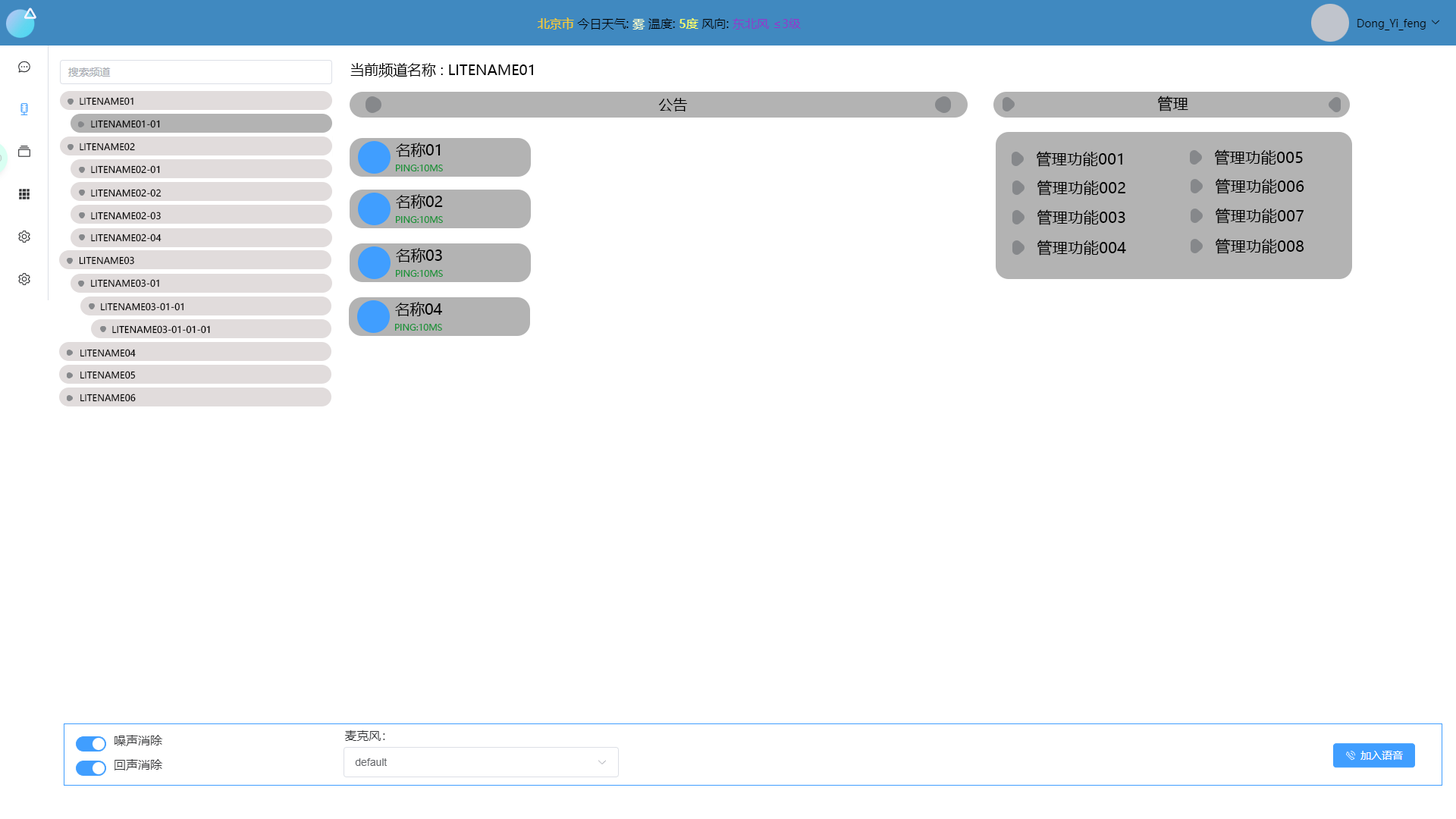
<style>
.page{position:relative;width:1456px;height:819px;background:#ffffff}
.page>*{position:absolute;margin:0}
.t1{font:14.3px "MicrosoftYaHeiUI";color:#000000;text-transform:uppercase}
.t2{font:9.1px "MicrosoftYaHeiUI";color:#000000;text-transform:uppercase}
.t3{font:15.5px "MicrosoftYaHeiUI";color:#000000;text-transform:uppercase}
.t4{font:14.8px "MicrosoftYaHeiUI";color:#000000;text-transform:uppercase}
.t5{font:8.9px "MicrosoftYaHeiUI";color:#199238;text-transform:uppercase}
</style>
<div class="page">
<p class="t1" style="left:350px;top:63px;width:183px;height:14px">当前频道名称 : LITENAME01</p>
<p class="t2" style="left:80px;top:97px;width:53px;height:8px">LiteName01</p>
<p class="t1" style="left:658px;top:98px;width:29px;height:13px">公告</p>
<p class="t3" style="left:1157px;top:96px;width:31px;height:15px">管理</p>
<p class="t2" style="left:91px;top:120px;width:69px;height:8px">LiteName01-01</p>
<p class="t2" style="left:80px;top:143px;width:55px;height:8px">LiteName02</p>
<p class="t4" style="left:396px;top:143px;width:45px;height:14px">名称01</p>
<p class="t3" style="left:1214px;top:149px;width:89px;height:16px">管理功能005</p>
<p class="t3" style="left:1036px;top:151px;width:86px;height:16px">管理功能001</p>
<p class="t2" style="left:91px;top:165px;width:69px;height:9px">LiteName02-01</p>
<p class="t5" style="left:396px;top:165px;width:47px;height:6px">ping:10ms</p>
<p class="t3" style="left:1037px;top:180px;width:88px;height:16px">管理功能002</p>
<p class="t3" style="left:1215px;top:178px;width:89px;height:16px">管理功能006</p>
<p class="t2" style="left:91px;top:189px;width:71px;height:8px">LiteName02-02</p>
<p class="t4" style="left:396px;top:194px;width:47px;height:15px">名称02</p>
<p class="t3" style="left:1037px;top:209px;width:88px;height:16px">管理功能003</p>
<p class="t3" style="left:1215px;top:208px;width:89px;height:16px">管理功能007</p>
<p class="t2" style="left:91px;top:212px;width:70px;height:8px">LiteName02-03</p>
<p class="t5" style="left:396px;top:216px;width:47px;height:7px">ping:10ms</p>
<p class="t2" style="left:91px;top:234px;width:71px;height:8px">LiteName02-04</p>
<p class="t3" style="left:1037px;top:240px;width:89px;height:16px">管理功能004</p>
<p class="t3" style="left:1215px;top:238px;width:89px;height:16px">管理功能008</p>
<p class="t2" style="left:79px;top:256px;width:55px;height:9px">LiteName03</p>
<p class="t4" style="left:396px;top:248px;width:46px;height:14px">名称03</p>
<p class="t5" style="left:396px;top:270px;width:47px;height:7px">ping:10ms</p>
<p class="t2" style="left:91px;top:279px;width:68px;height:8px">LiteName03-01</p>
<p class="t2" style="left:101px;top:303px;width:83px;height:8px">LiteName03-01-01</p>
<p class="t4" style="left:395px;top:302px;width:47px;height:14px">名称04</p>
<p class="t2" style="left:112px;top:325px;width:98px;height:9px">LiteName03-01-01-01</p>
<p class="t5" style="left:395px;top:324px;width:47px;height:7px">ping:10ms</p>
<p class="t2" style="left:80px;top:349px;width:56px;height:8px">LiteName04</p>
<p class="t2" style="left:80px;top:371px;width:56px;height:8px">LiteName05</p>
<p class="t2" style="left:80px;top:394px;width:56px;height:8px">LiteName06</p>
</div>
